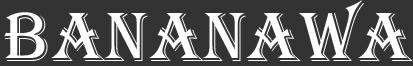
<style>
.page{position:relative;width:413px;height:66px;background:#333333}
.page>*{position:absolute;margin:0}
.t1{font:72px "Algerian";color:#ffffff}
</style>
<div class="page">
<p class="t1" style="left:4px;top:0px;width:409px;height:61px">BANANAWA</p>
</div>
